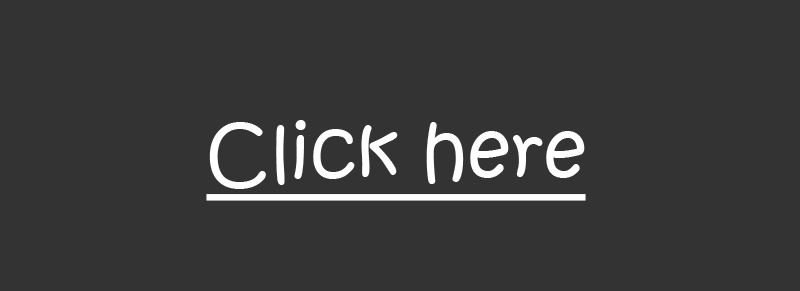
<style>
.page{position:relative;width:800px;height:291px;background:#333333}
.page>*{position:absolute;margin:0}
.t1{font:75px "KristenITC-Regular";color:#ffffff;text-decoration:underline}
</style>
<div class="page">
<p class="t1" style="left:206px;top:120px;width:380px;height:81px">Click here</p>
</div>
